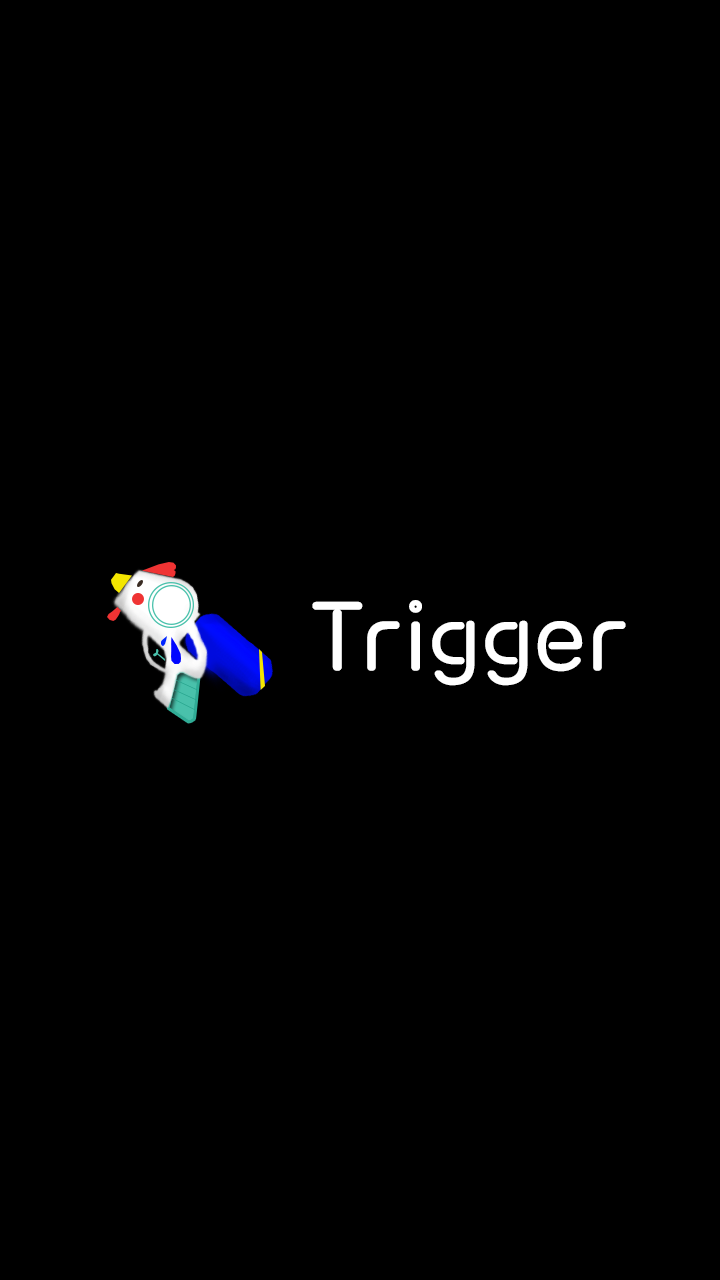
<style>
.page{position:relative;width:720px;height:1280px;background:#000000}
.page>*{position:absolute;margin:0}
.t1{font:89.1px "RixNeonSignB";letter-spacing:-0.025em;color:#ffffff}
</style>
<div class="page">
<p class="t1" style="left:312px;top:600px;width:314px;height:86px">Trigger</p>
</div>
